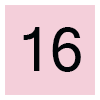
<style>
.page{position:relative;width:100px;height:100px;background:#f4cfda}
.page>*{position:absolute;margin:0}
.t1{font:60px "MicrosoftSansSerif";color:#000407}
</style>
<div class="page">
<p class="t1" style="left:23px;top:27px;width:58px;height:45px">16</p>
</div>
